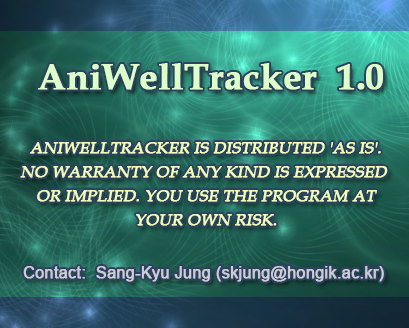
<style>
.page{position:relative;width:409px;height:328px}
.page>*{position:absolute;margin:0}
.t1{font:36px "BookAntiqua-Bold";color:#ddffca;font-weight:bold}
.t2{font:16px/24px "BookAntiqua";color:#f1ffb9;font-weight:bold;font-style:italic}
.t3{font:16px "ArialMT";color:#cdcdd5;font-weight:bold}
</style>
<div class="page">
<p class="t1" style="left:38px;top:63px;width:345px;height:27px">AniWellTracker  1.0</p>
<p class="t2" style="left:20px;top:142px;width:368px;height:84px;text-align:center">ANIWELLTRACKER IS DISTRIBUTED 'AS IS'.<br>NO WARRANTY OF ANY KIND IS EXPRESSED <br>OR IMPLIED. YOU USE THE PROGRAM AT<br>YOUR OWN RISK.</p>
<p class="t3" style="left:23px;top:266px;width:361px;height:16px">Contact:  Sang-Kyu Jung (skjung@hongik.ac.kr)</p>
</div>
